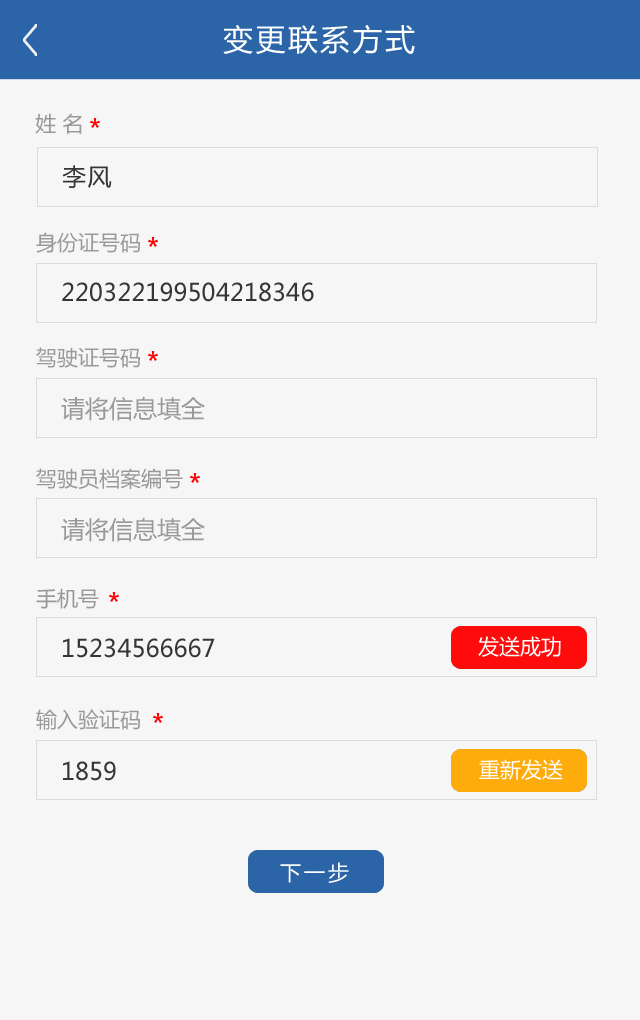
<style>
.page{position:relative;width:640px;height:1020px;background:#f6f6f6}
.page>*{position:absolute;margin:0}
.t1{font:30px "MicrosoftYaHei";letter-spacing:0.08em;color:#ffffff}
.t2{font:21px "MicrosoftYaHei";color:#999999}
.t3{font:24px "MicrosoftYaHei";letter-spacing:0.06em;color:#353535}
.t4{font:24px "MicrosoftYaHei";color:#353535}
.t5{font:24px "MicrosoftYaHei";color:#999999}
.t6{font:21px "MicrosoftYaHei";color:#ffffff}
.t7{font:21px "MicrosoftYaHei";letter-spacing:0.14em;color:#ffffff}
</style>
<div class="page">
<p class="t1" style="left:223px;top:25px;width:192px;height:29px">变更联系方式</p>
<p class="t2" style="left:35px;top:113px;width:47px;height:21px">姓 名</p>
<p class="t3" style="left:62px;top:165px;width:50px;height:23px">李风</p>
<p class="t2" style="left:36px;top:232px;width:104px;height:21px">身份证号码</p>
<p class="t4" style="left:62px;top:282px;width:252px;height:20px">220322199504218346</p>
<p class="t2" style="left:36px;top:347px;width:104px;height:21px">驾驶证号码</p>
<p class="t5" style="left:61px;top:396px;width:144px;height:25px">请将信息填全</p>
<p class="t2" style="left:36px;top:468px;width:147px;height:21px">驾驶员档案编号</p>
<p class="t5" style="left:61px;top:517px;width:144px;height:25px">请将信息填全</p>
<p class="t2" style="left:36px;top:588px;width:63px;height:21px">手机号</p>
<p class="t4" style="left:63px;top:638px;width:152px;height:20px">15234566667</p>
<p class="t6" style="left:478px;top:636px;width:83px;height:21px">发送成功</p>
<p class="t2" style="left:36px;top:709px;width:104px;height:21px">输入验证码</p>
<p class="t4" style="left:63px;top:761px;width:53px;height:20px">1859</p>
<p class="t6" style="left:479px;top:759px;width:84px;height:21px">重新发送</p>
<p class="t7" style="left:280px;top:862px;width:69px;height:21px">下一步</p>
</div>
